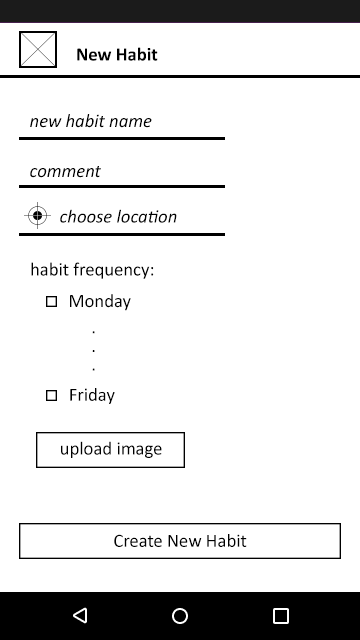
<style>
.page{position:relative;width:360px;height:640px;background:#ffffff}
.page>*{position:absolute;margin:0}
.t1{font:18.9px "Calibri-Bold";color:#000000}
.t2{font:19px "Calibri-Italic";color:#000000}
.t3{font:18.7px "Calibri-Italic";color:#000000}
.t4{font:19px "Calibri";color:#000000}
.t5{font:18.7px "Calibri";color:#000000}
</style>
<div class="page">
<p class="t1" style="left:77px;top:47px;width:81px;height:14px">New Habit</p>
<p class="t2" style="left:30px;top:114px;width:122px;height:14px">new habit name</p>
<p class="t2" style="left:30px;top:166px;width:71px;height:12px">comment</p>
<p class="t3" style="left:60px;top:209px;width:117px;height:14px">choose location</p>
<p class="t4" style="left:31px;top:262px;width:123px;height:17px">habit frequency:</p>
<p class="t4" style="left:70px;top:294px;width:61px;height:17px">Monday</p>
<p class="t5" style="left:92px;top:331px;width:3px;height:40px">...</p>
<p class="t5" style="left:70px;top:388px;width:45px;height:16px">Friday</p>
<p class="t5" style="left:61px;top:441px;width:101px;height:17px">upload image</p>
<p class="t5" style="left:114px;top:534px;width:133px;height:13px">Create New Habit</p>
</div>
